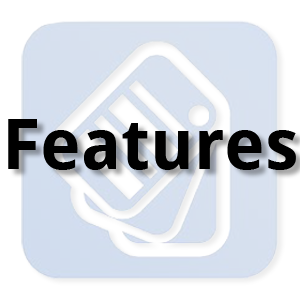
<style>
.page{position:relative;width:300px;height:300px;background:#ffffff}
.page>*{position:absolute;margin:0}
.t1{font:120px "DroidSans-Bold";color:#000000}
</style>
<div class="page">
<p class="t1" style="left:8px;top:119px;width:288px;height:51px">Features</p>
</div>
